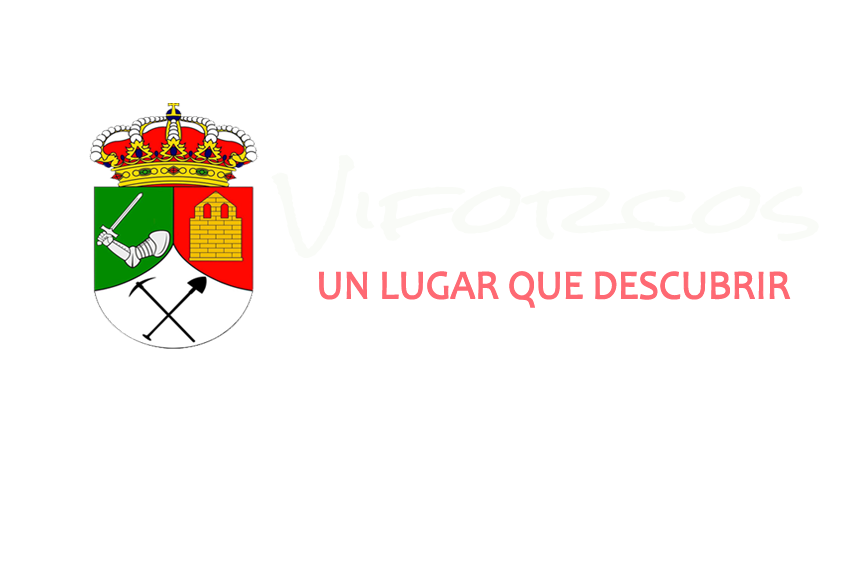
<style>
.page{position:relative;width:850px;height:567px;background:#ffffff}
.page>*{position:absolute;margin:0}
.t1{font:70px "RockSalt-Regular";letter-spacing:-0.025em;color:#f9fbf7;scale:1.49 1}
.t2{font:70px "RockSalt-Regular";letter-spacing:-0.025em;color:#fe6973;scale:1.49 1}
.t3{font:40.5px "Candara";letter-spacing:-0.025em;color:#fe6973;font-weight:bold}
</style>
<div class="page">
<p class="t1" style="left:271px;top:154px;width:548px;height:104px"><span class="t2"> </span>Viforcos</p>
<p class="t3" style="left:319px;top:271px;width:472px;height:37px">UN LUGAR QUE DESCUBRIR</p>
</div>
